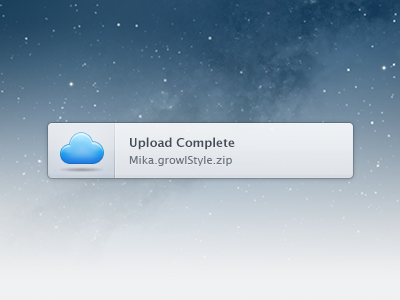
<style>
.page{position:relative;width:400px;height:300px}
.page>*{position:absolute;margin:0}
.t1{font:12px "LucidaGrande-Bold";color:#434c59}
.t2{font:11px "LucidaGrande";color:#6c7480}
</style>
<div class="page">
<p class="t1" style="left:130px;top:137px;width:105px;height:13px">Upload Complete</p>
<p class="t2" style="left:129px;top:156px;width:103px;height:10px">Mika.growlStyle.zip</p>
</div>
